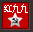
<style>
.page{position:relative;width:33px;height:32px;background:#c50000}
.page>*{position:absolute;margin:0}
.t1{font:10.4px "SimSun";letter-spacing:-0.25em;color:#ffffff}
</style>
<div class="page">
<p class="t1" style="left:4px;top:4px;width:24px;height:9px">红九九</p>
</div>
